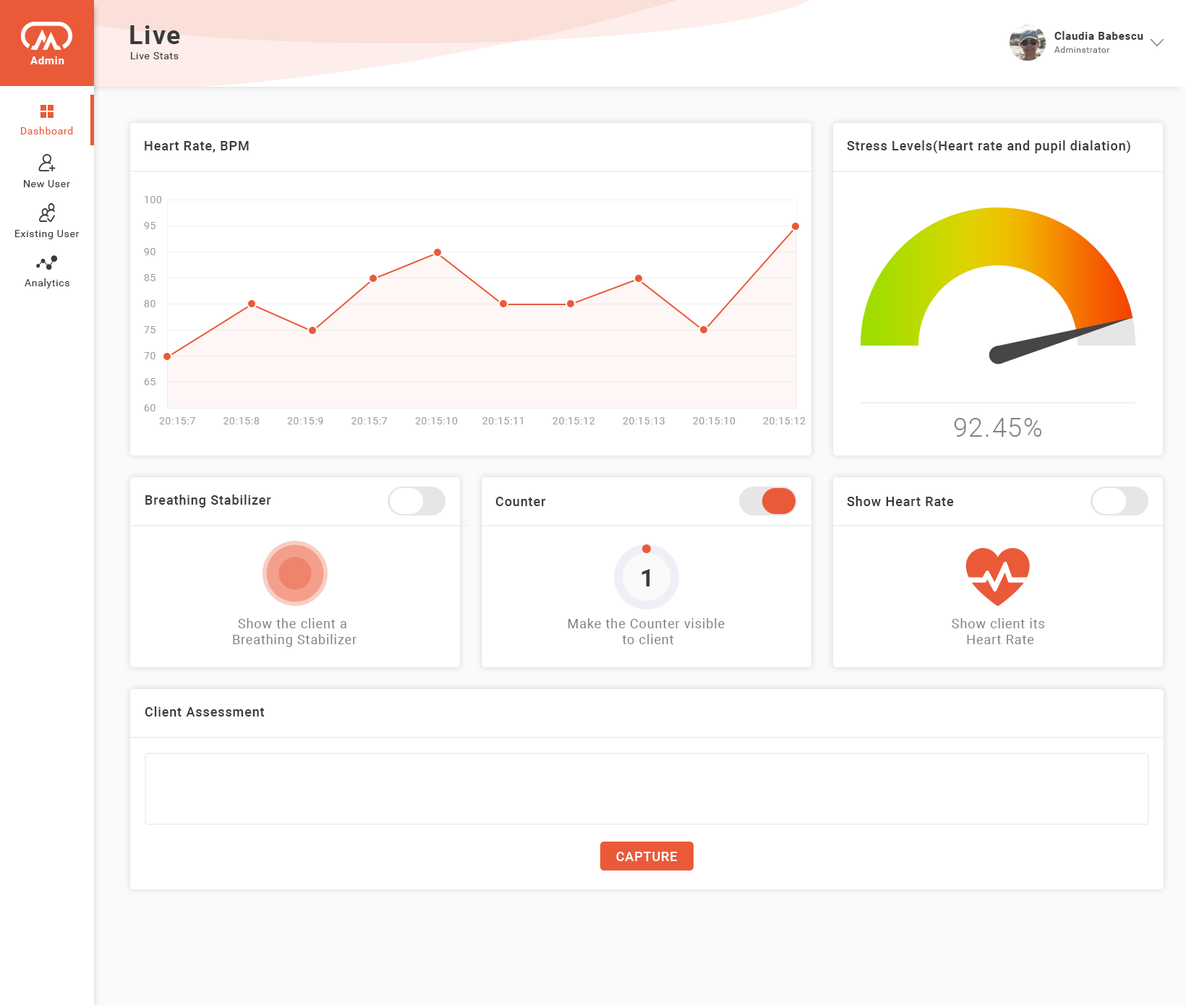
<style>
.page{position:relative;width:1186px;height:1005px;background:#ffffff}
.page>*{position:absolute;margin:0}
.t1{font:26px "Roboto-Bold";letter-spacing:0.05em;color:#3b3b3b}
.t2{font:10.8px "Roboto-Bold";letter-spacing:0.05em;color:#3b3b3b}
.t3{font:10.1px "Roboto-Regular";letter-spacing:0.05em;color:#3b3b3b}
.t4{font:8.7px "Roboto-Regular";letter-spacing:0.05em;color:#717171}
.t5{font:10.8px "Roboto-Bold";letter-spacing:0.05em;color:#ffffff}
.t6{font:10.1px "Roboto-Regular";letter-spacing:0.05em;color:#ea5a39}
.t7{font:13px "Roboto-Medium";letter-spacing:0.05em;color:#3b3b3b}
.t8{font:10.1px/26px "Roboto-Regular";letter-spacing:0.05em;color:#a1a1a1}
.t9{font:10.1px "Roboto-Regular";letter-spacing:0.05em;color:#a1a1a1}
.t10{font:26px "Roboto-Light";letter-spacing:0.05em;color:#828282}
.t11{font:24.6px "Roboto-Bold";letter-spacing:0.05em;color:#3b3b3b}
.t12{font:13px "Roboto-Regular";letter-spacing:0.05em;color:#828282}
.t13{font:13px "Roboto-Medium";letter-spacing:0.05em;color:#ffffff;text-transform:uppercase}
</style>
<div class="page">
<p class="t1" style="left:130px;top:25px;width:50px;height:19px">Live</p>
<p class="t2" style="left:1054px;top:31px;width:89px;height:9px">Claudia Babescu</p>
<p class="t3" style="left:131px;top:52px;width:48px;height:7px">Live Stats</p>
<p class="t4" style="left:1054px;top:46px;width:56px;height:7px">Adminstrator</p>
<p class="t5" style="left:30px;top:56px;width:34px;height:8px">Admin</p>
<p class="t6" style="left:21px;top:127px;width:52px;height:8px">Dashboard</p>
<p class="t7" style="left:145px;top:141px;width:104px;height:12px">Heart Rate, BPM</p>
<p class="t7" style="left:847px;top:140px;width:283px;height:13px">Stress Levels(Heart rate and pupil dialation)</p>
<p class="t3" style="left:24px;top:180px;width:46px;height:7px">New User</p>
<p class="t8" style="left:144px;top:196px;width:18px;height:216px">100<br>95<br>90<br>85<br>80<br>75<br>70<br>65<br>60</p>
<p class="t3" style="left:15px;top:230px;width:65px;height:9px">Existing User</p>
<p class="t3" style="left:25px;top:278px;width:44px;height:11px">Analytics</p>
<p class="t9" style="left:159px;top:417px;width:647px;height:8px">20:15:7         20:15:8         20:15:9         20:15:7         20:15:10        20:15:11         20:15:12         20:15:13         20:15:10         20:15:12</p>
<p class="t10" style="left:954px;top:418px;width:87px;height:19px">92.45%</p>
<p class="t7" style="left:145px;top:495px;width:126px;height:13px">Breathing Stabilizer</p>
<p class="t7" style="left:495px;top:497px;width:51px;height:9px">Counter</p>
<p class="t7" style="left:847px;top:496px;width:107px;height:10px">Show Heart Rate</p>
<p class="t11" style="left:642px;top:569px;width:8px;height:18px">1</p>
<p class="t12" style="left:233px;top:618px;width:124px;height:29px;text-align:center">Show the client a <br>Breathing Stabilizer</p>
<p class="t12" style="left:568px;top:618px;width:157px;height:26px;text-align:center">Make the Counter visible <br>to client</p>
<p class="t12" style="left:952px;top:618px;width:92px;height:26px;text-align:center">Show client its <br>Heart Rate</p>
<p class="t7" style="left:145px;top:707px;width:120px;height:10px">Client Assessment</p>
<p class="t13" style="left:616px;top:852px;width:61px;height:9px">Capture</p>
</div>
